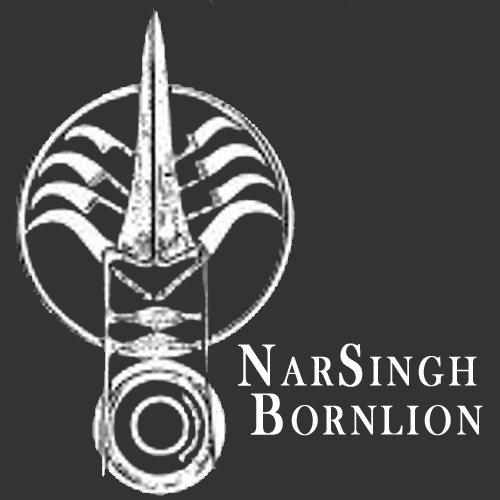
<style>
.page{position:relative;width:500px;height:500px;background:#333333}
.page>*{position:absolute;margin:0}
.t1{font:60.7px "BaskOldFace";letter-spacing:0.1em;color:#ffffff;font-variant:small-caps;font-weight:bold;scale:0.82 1}
</style>
<div class="page">
<p class="t1" style="left:238px;top:343px;width:245px;height:93px;text-align:center">NarSingh<br> Bornlion</p>
</div>
